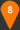
<style>
.page{position:relative;width:20px;height:30px;background:#ff7800}
.page>*{position:absolute;margin:0}
.t1{font:9px "OpenSans";color:#ffffff;font-weight:bold}
</style>
<div class="page">
<p class="t1" style="left:7px;top:6px;width:6px;height:8px">8</p>
</div>
